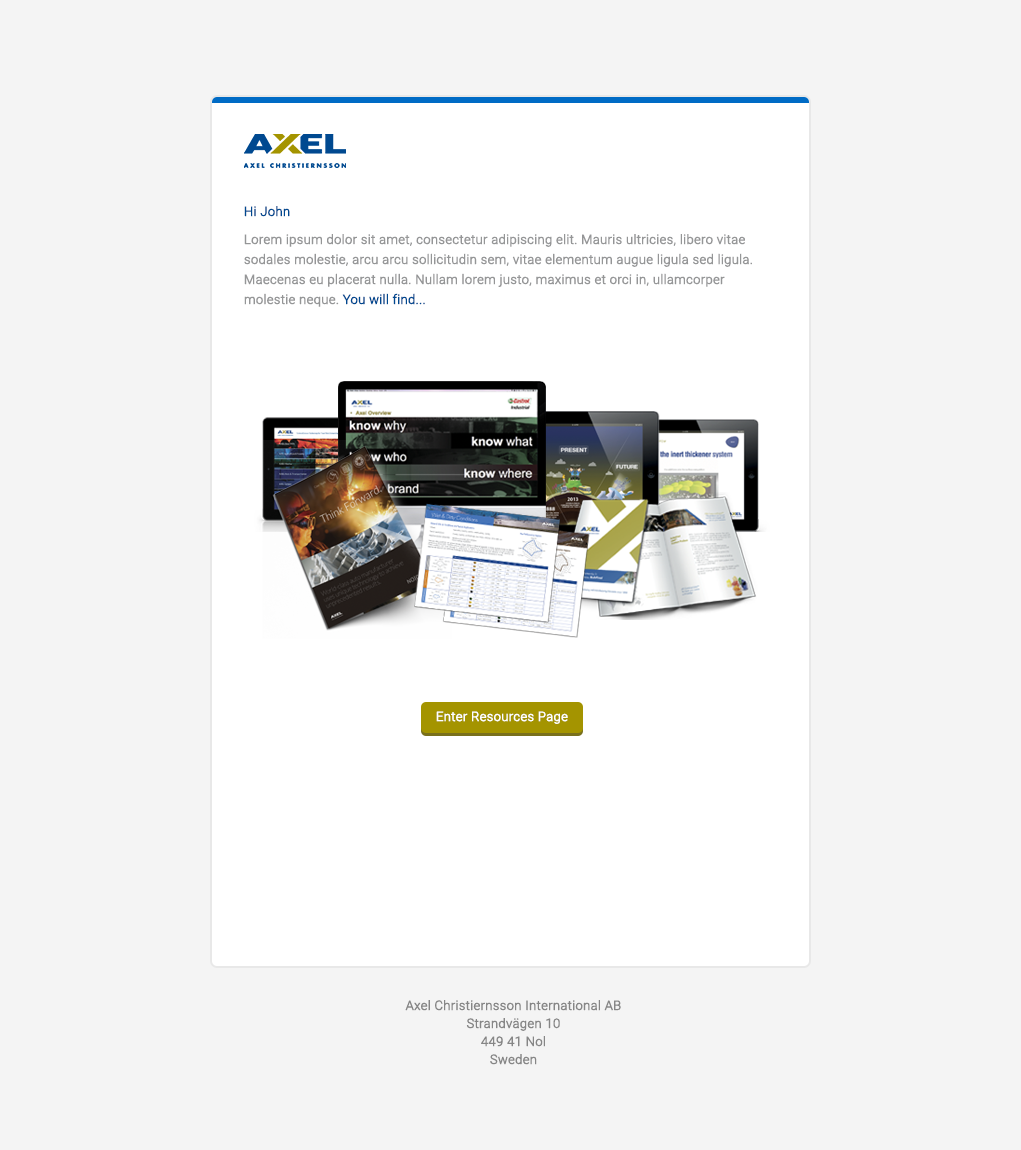
<style>
.page{position:relative;width:1021px;height:1150px;background:#f4f4f4}
.page>*{position:absolute;margin:0}
.t1{font:13px "Roboto-Light";color:#004990;font-weight:bold}
.t2{font:13px/20px "Roboto-Light";color:#959697;font-weight:bold}
.t3{font:13px/20px "Roboto-Light";color:#004990;font-weight:bold}
.t4{font:13px "Roboto-Light";color:#ffffff;font-weight:bold}
.t5{font:13px/18px "Roboto-Light";color:#868686;font-weight:bold}
</style>
<div class="page">
<p class="t1" style="left:244px;top:206px;width:46px;height:11px">Hi John</p>
<p class="t2" style="left:244px;top:234px;width:508px;height:73px">Lorem ipsum dolor sit amet, consectetur adipiscing elit. Mauris ultricies, libero vitae sodales molestie, arcu arcu sollicitudin sem, vitae elementum augue ligula sed ligula. Maecenas eu placerat nulla. Nullam lorem justo, maximus et orci in, ullamcorper molestie neque. <span class="t3">You will find...</span></p>
<p class="t4" style="left:436px;top:711px;width:132px;height:13px">Enter Resources Page</p>
<p class="t5" style="left:405px;top:1000px;width:216px;height:65px;text-align:center">Axel Christiernsson International AB<br>Strandvägen 10<br>449 41 Nol<br>Sweden</p>
</div>
